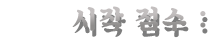
<style>
.page{position:relative;width:209px;height:40px;background:#ffffff}
.page>*{position:absolute;margin:0}
.t1{font:26.9px "SDKukdetopokki-bBd";letter-spacing:0.08em}
</style>
<div class="page">
<p class="t1" style="left:72px;top:6px;width:134px;height:26px">시작 점수 :</p>
</div>
